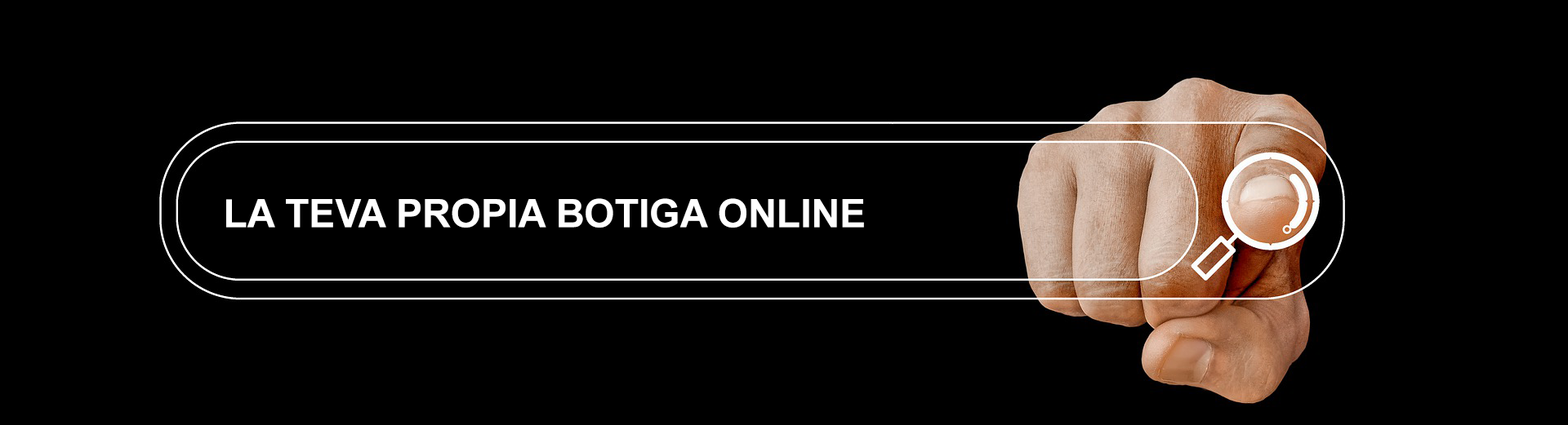
<style>
.page{position:relative;width:1568px;height:425px;background:#000000}
.page>*{position:absolute;margin:0}
.t1{font:39.2px "Arial-BoldMT";color:#ffffff}
</style>
<div class="page">
<p class="t1" style="left:226px;top:198px;width:638px;height:30px">LA TEVA PROPIA BOTIGA ONLINE</p>
</div>
